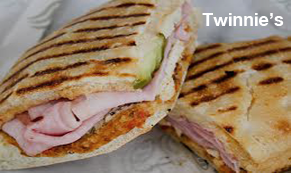
<style>
.page{position:relative;width:291px;height:173px}
.page>*{position:absolute;margin:0}
.t1{font:18px "HelveticaNeue-Bold";color:#ffffff}
</style>
<div class="page">
<p class="t1" style="left:202px;top:13px;width:82px;height:13px">Twinnie’s</p>
</div>
